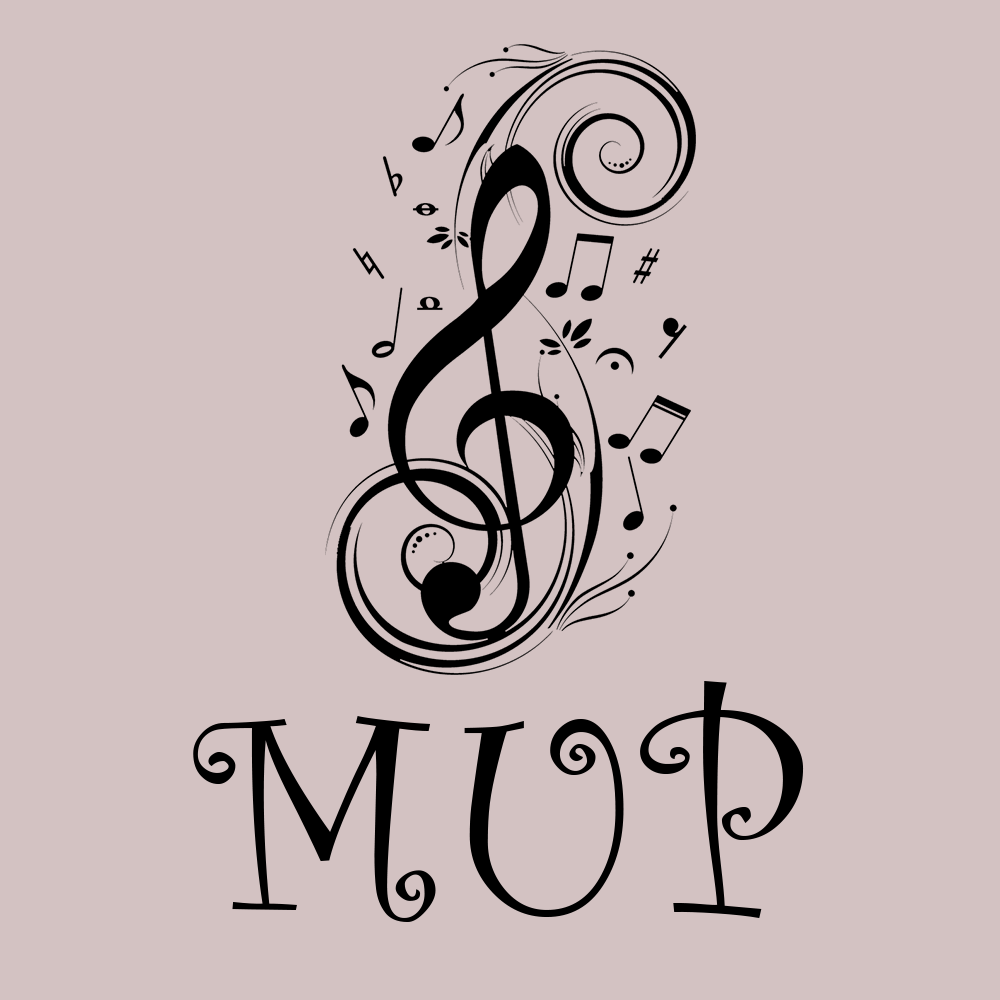
<style>
.page{position:relative;width:1000px;height:1000px;background:#d3c2c2}
.page>*{position:absolute;margin:0}
.t1{font:300px "CurlzMT";color:#000000}
</style>
<div class="page">
<p class="t1" style="left:193px;top:681px;width:611px;height:241px">MUP</p>
</div>
